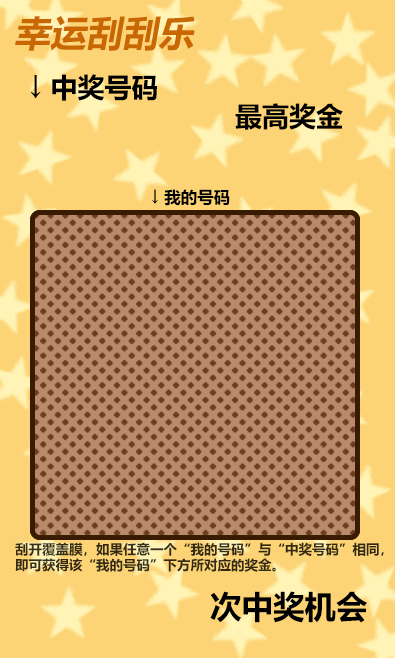
<style>
.page{position:relative;width:395px;height:658px;background:#fcd375}
.page>*{position:absolute;margin:0}
.t1{font:36px "MicrosoftYaHei-Bold";color:#c96803;font-style:italic}
.t2{font:27px "MicrosoftYaHei-Bold";color:#000000}
.t3{font:16.5px "MicrosoftYaHei-Bold";color:#000000}
.t4{font:13.5px "MicrosoftYaHei-Bold";color:#332912}
.t5{font:31.5px "MicrosoftYaHei-Bold";color:#000000}
</style>
<div class="page">
<p class="t1" style="left:15px;top:16px;width:180px;height:35px">幸运刮刮乐</p>
<p class="t2" style="left:31px;top:74px;width:126px;height:27px">↓ 中奖号码</p>
<p class="t2" style="left:235px;top:103px;width:108px;height:27px">最高奖金</p>
<p class="t3" style="left:152px;top:189px;width:78px;height:17px">↓ 我的号码</p>
<p class="t4" style="left:15px;top:542px;width:369px;height:30px">刮开覆盖膜，如果任意一个“我的号码”与“中奖号码”相同，<br>即可获得该“我的号码”下方所对应的奖金。</p>
<p class="t5" style="left:210px;top:591px;width:157px;height:32px">次中奖机会</p>
</div>
